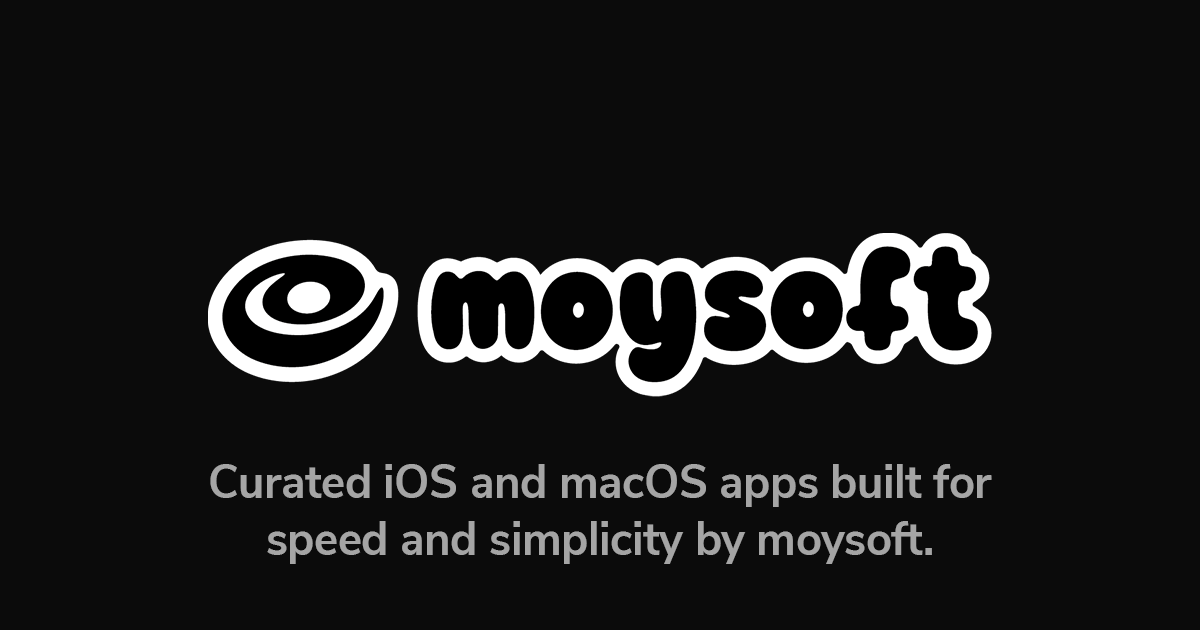
<style>
.page{position:relative;width:1200px;height:630px;background:#0b0b0b}
.page>*{position:absolute;margin:0}
.t1{font:46.8px "NunitoSans-Bold";letter-spacing:-0.01em;color:#a5a5a5;scale:0.97 1}
</style>
<div class="page">
<p class="t1" style="left:210px;top:464px;width:782px;height:100px;text-align:center">Curated iOS and macOS apps built for<br>speed and simplicity by moysoft.</p>
</div>
